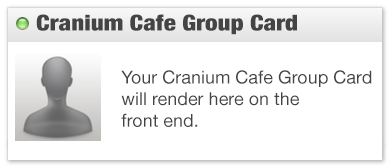
<style>
.page{position:relative;width:390px;height:168px;background:#ffffff}
.page>*{position:absolute;margin:0}
.t1{font:22px "HelveticaNeue-CondensedBlack";color:#444444;scale:1.14 1}
.t2{font:18px "HelveticaNeue";color:#444444}
</style>
<div class="page">
<p class="t1" style="left:36px;top:14px;width:261px;height:21px">Cranium Cafe Group Card</p>
<p class="t2" style="left:121px;top:70px;width:251px;height:57px">Your Cranium Cafe Group Card <br>will render here on the <br>front end.</p>
</div>
